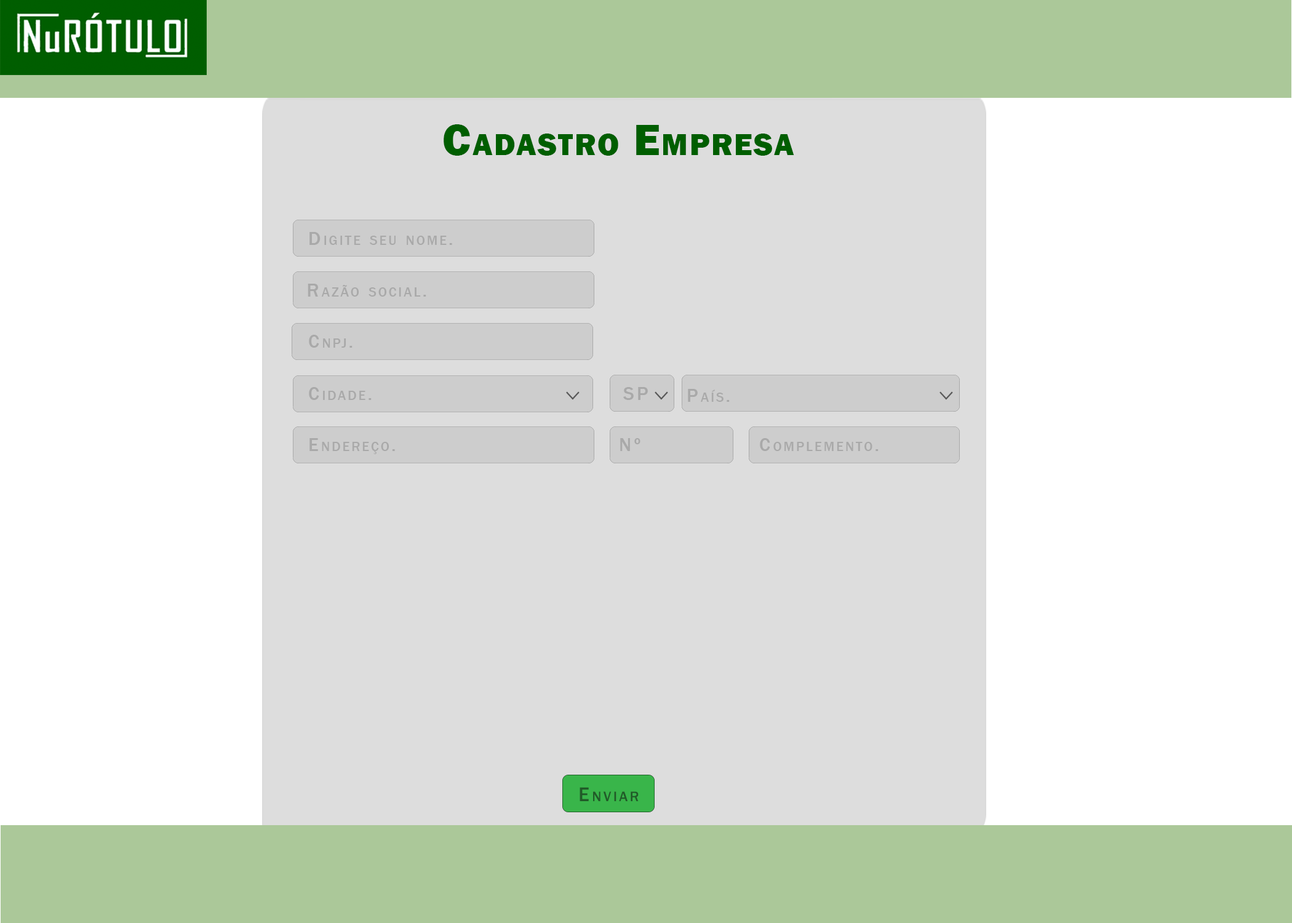
<style>
.page{position:relative;width:1292px;height:923px;background:#dddddd}
.page>*{position:absolute;margin:0}
.t1{font:76.9px "FranklinGothic-Heavy";letter-spacing:0.045em;color:#005e00;font-variant:small-caps}
.t2{font:32.6px "FranklinGothic-Medium";letter-spacing:0.145em;color:#969696;font-variant:small-caps}
.t3{font:35.2px "FranklinGothic-Medium";letter-spacing:0.145em;color:#215a28;font-variant:small-caps}
</style>
<div class="page">
<p class="t1" style="left:444px;top:124px;width:350px;height:32px">Cadastro Empresa</p>
<p class="t2" style="left:309px;top:232px;width:143px;height:13px;opacity:0.68">Digite seu nome.</p>
<p class="t2" style="left:308px;top:284px;width:118px;height:13px;opacity:0.68">Razão social.</p>
<p class="t2" style="left:309px;top:335px;width:44px;height:13px;opacity:0.68">Cnpj.</p>
<p class="t2" style="left:309px;top:387px;width:63px;height:13px;opacity:0.68">Cidade.</p>
<p class="t2" style="left:623px;top:387px;width:25px;height:13px;opacity:0.68">SP</p>
<p class="t2" style="left:688px;top:389px;width:42px;height:13px;opacity:0.68">País.</p>
<p class="t2" style="left:309px;top:438px;width:86px;height:16px;opacity:0.68">Endereço.</p>
<p class="t2" style="left:620px;top:438px;width:20px;height:13px;opacity:0.68">Nº</p>
<p class="t2" style="left:760px;top:438px;width:119px;height:13px;opacity:0.68">Complemento.</p>
<p class="t3" style="left:580px;top:787px;width:59px;height:14px">Enviar</p>
</div>
